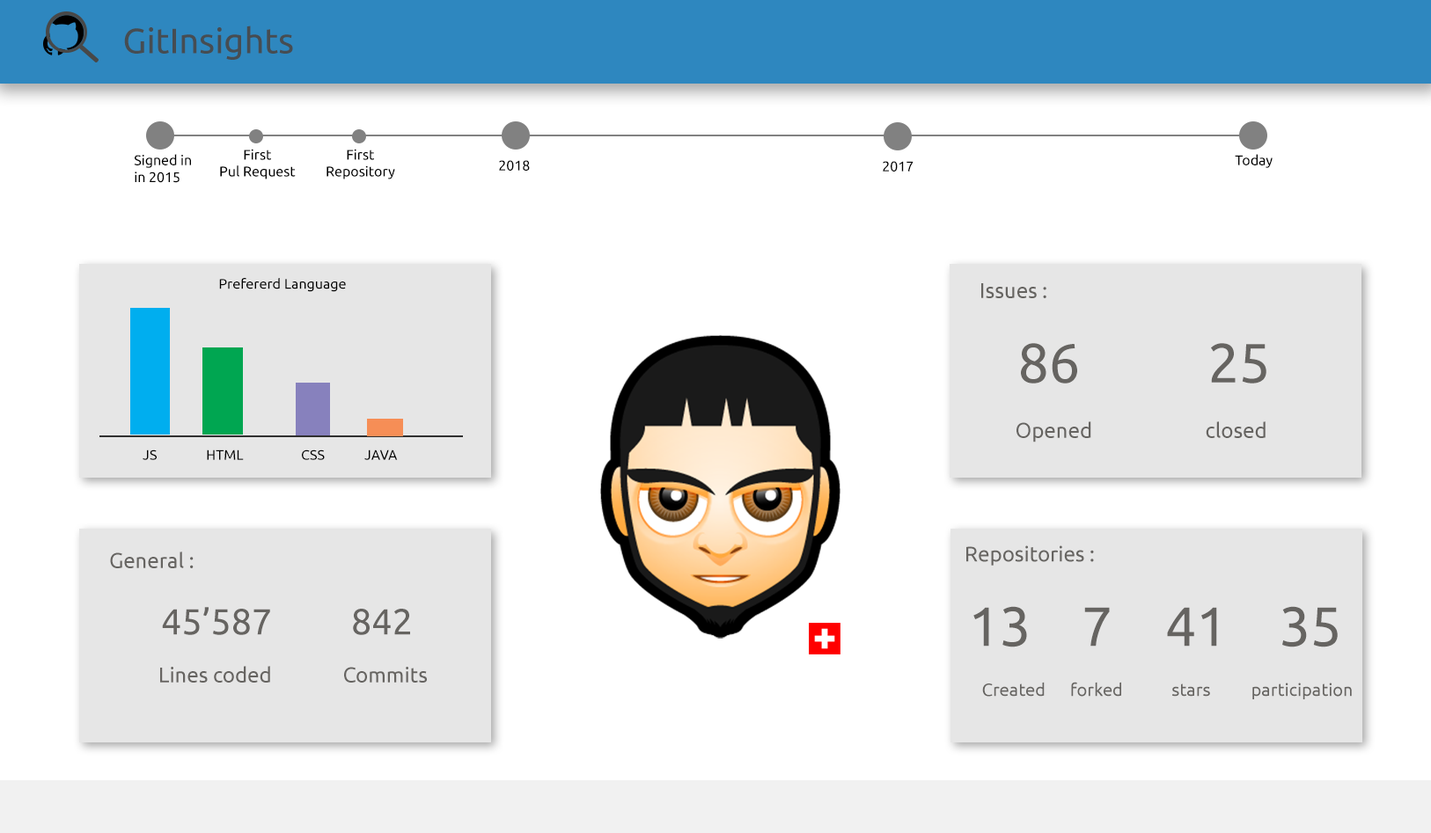
<style>
.page{position:relative;width:1431px;height:833px;background:#ffffff}
.page>*{position:absolute;margin:0}
.t1{font:35.2px "Ubuntu-Regular";color:#464d52}
.t2{font:14px "Ubuntu-Regular";color:#000000}
.t3{font:10.6px "Ubuntu-Regular";color:#000000}
.t4{font:21.1px "Ubuntu-Regular";color:#666461}
.t5{font:55.2px "Ubuntu-Regular";color:#666461}
.t6{font:36.4px "Ubuntu-Regular";color:#666461}
.t7{font:17.6px "Ubuntu-Regular";color:#666461}
</style>
<div class="page">
<p class="t1" style="left:124px;top:26px;width:169px;height:34px">GitInsights</p>
<p class="t2" style="left:220px;top:149px;width:76px;height:31px;text-align:center">First<br>Pul Request</p>
<p class="t2" style="left:326px;top:149px;width:69px;height:31px;text-align:center">First<br>Repository</p>
<p class="t2" style="left:134px;top:154px;width:57px;height:29px">Signed in<br>in 2015</p>
<p class="t2" style="left:499px;top:160px;width:31px;height:11px">2018</p>
<p class="t2" style="left:883px;top:161px;width:30px;height:11px">2017</p>
<p class="t2" style="left:1235px;top:154px;width:37px;height:14px">Today</p>
<p class="t3" style="left:219px;top:278px;width:127px;height:14px">Prefererd Language</p>
<p class="t4" style="left:981px;top:283px;width:65px;height:15px">Issues :</p>
<p class="t5" style="left:1021px;top:343px;width:245px;height:41px">86     25</p>
<p class="t4" style="left:1016px;top:422px;width:249px;height:21px">Opened    closed</p>
<p class="t3" style="left:143px;top:450px;width:255px;height:10px">JS  HTML  CSS  JAVA</p>
<p class="t4" style="left:966px;top:546px;width:128px;height:20px">Repositories :</p>
<p class="t4" style="left:110px;top:552px;width:84px;height:16px">General :</p>
<p class="t6" style="left:162px;top:607px;width:248px;height:28px">45’587   842</p>
<p class="t5" style="left:973px;top:606px;width:365px;height:42px">13    7    41   35</p>
<p class="t4" style="left:160px;top:666px;width:110px;height:17px">Lines coded</p>
<p class="t4" style="left:344px;top:667px;width:83px;height:16px">Commits</p>
<p class="t7" style="left:982px;top:682px;width:370px;height:18px">Created      forked            stars          participation</p>
</div>
